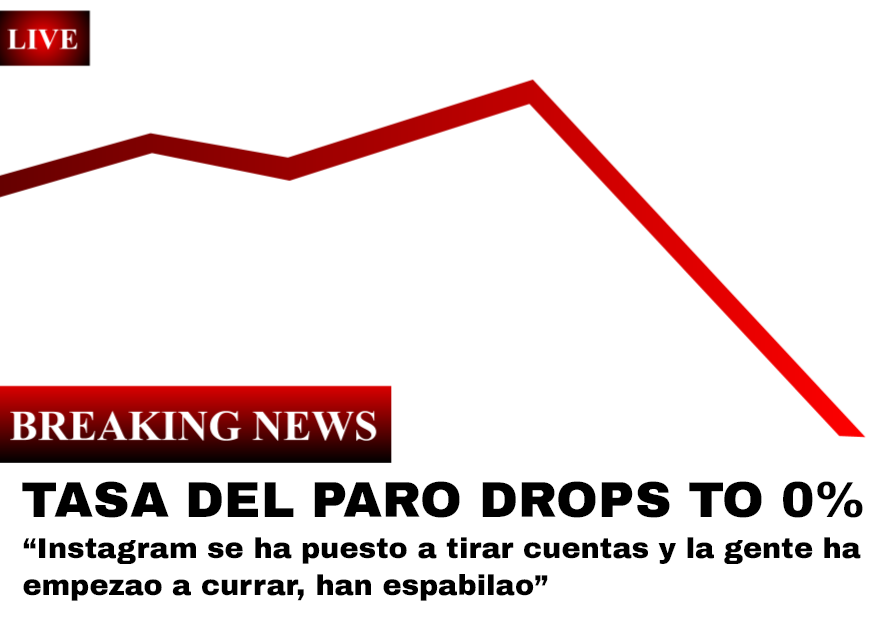
<style>
.page{position:relative;width:886px;height:619px;background:#ffffff}
.page>*{position:absolute;margin:0}
.t1{font:50.3px "ArchivoBlack-Regular";color:#000000}
.t2{font:28.7px "ArchivoBlack-Regular";color:#000000}
</style>
<div class="page">
<p class="t1" style="left:22px;top:481px;width:841px;height:37px">TASA DEL PARO DROPS TO 0%</p>
<p class="t2" style="left:23px;top:537px;width:838px;height:64px">“Instagram se ha puesto a tirar cuentas y la gente ha<br>empezao a currar, han espabilao”</p>
</div>
